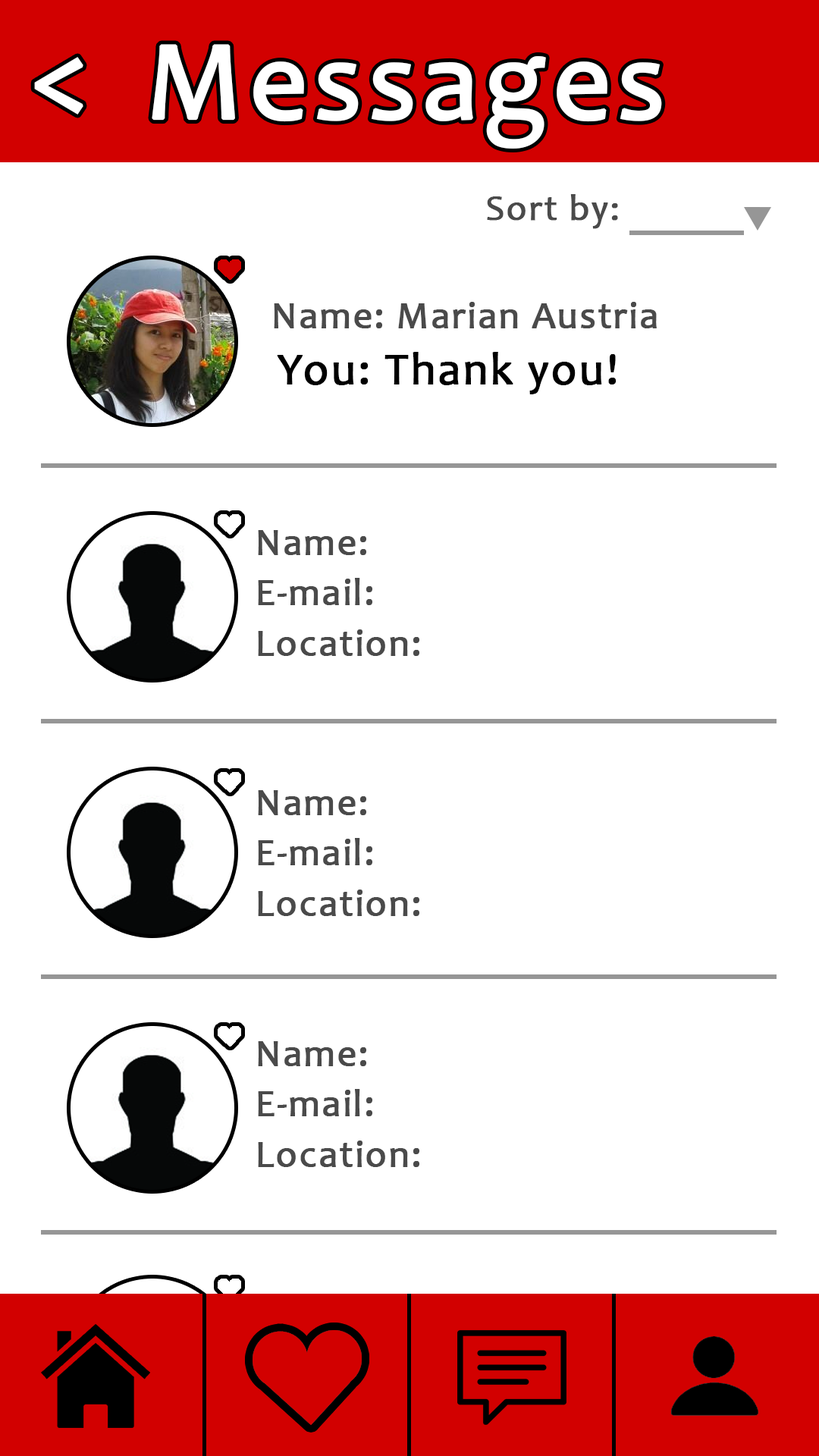
<style>
.page{position:relative;width:819px;height:1456px;background:#ffffff}
.page>*{position:absolute;margin:0}
.t1{font:113.4px "Candara";letter-spacing:0.03em;color:#ffffff;font-weight:bold}
.t2{font:113.7px "Candara";letter-spacing:0.03em;color:#ffffff;font-weight:bold}
.t3{font:36.4px "Candara";letter-spacing:0.03em;color:#4a4a4a;font-weight:bold}
.t4{font:37.9px "Candara";letter-spacing:0.03em;color:#4a4a4a;font-weight:bold}
.t5{font:45.5px "Candara";letter-spacing:0.03em;color:#000000;font-weight:bold}
</style>
<div class="page">
<p class="t1" style="left:152px;top:44px;width:510px;height:105px">Messages</p>
<p class="t2" style="left:34px;top:57px;width:49px;height:58px">&lt;</p>
<p class="t3" style="left:487px;top:194px;width:131px;height:35px">Sort by:</p>
<p class="t4" style="left:274px;top:302px;width:383px;height:26px">Name: Marian Austria</p>
<p class="t5" style="left:277px;top:352px;width:340px;height:42px">You: Thank you!</p>
<p class="t4" style="left:258px;top:530px;width:108px;height:25px">Name:</p>
<p class="t4" style="left:258px;top:578px;width:114px;height:27px">E-mail:</p>
<p class="t4" style="left:258px;top:629px;width:161px;height:27px">Location:</p>
<p class="t4" style="left:258px;top:790px;width:108px;height:25px">Name:</p>
<p class="t4" style="left:258px;top:838px;width:114px;height:27px">E-mail:</p>
<p class="t4" style="left:258px;top:890px;width:161px;height:26px">Location:</p>
<p class="t4" style="left:258px;top:1041px;width:108px;height:25px">Name:</p>
<p class="t4" style="left:258px;top:1089px;width:114px;height:27px">E-mail:</p>
<p class="t4" style="left:258px;top:1141px;width:161px;height:26px">Location:</p>
</div>
